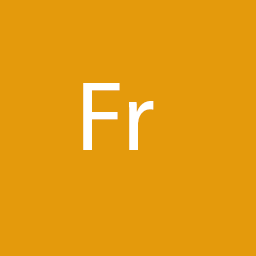
<style>
.page{position:relative;width:256px;height:256px;background:#e49a0c}
.page>*{position:absolute;margin:0}
.t1{font:100px "MyriadPro-Regular";color:#ffffff}
</style>
<div class="page">
<p class="t1" style="left:83px;top:83px;width:71px;height:67px">Fr</p>
</div>
